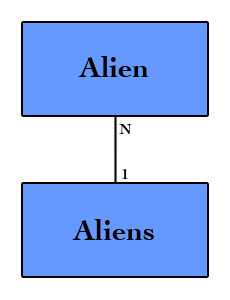
<style>
.page{position:relative;width:230px;height:300px;background:#6699ff}
.page>*{position:absolute;margin:0}
.t1{font:30px "Cochin-Bold";color:#000000}
.t2{font:15px "Cochin-Bold";color:#000000}
</style>
<div class="page">
<p class="t1" style="left:78px;top:56px;width:71px;height:21px">Alien</p>
<p class="t2" style="left:119px;top:124px;width:13px;height:10px">N</p>
<p class="t2" style="left:122px;top:169px;width:6px;height:10px">1</p>
<p class="t1" style="left:72px;top:219px;width:82px;height:21px">Aliens</p>
</div>
